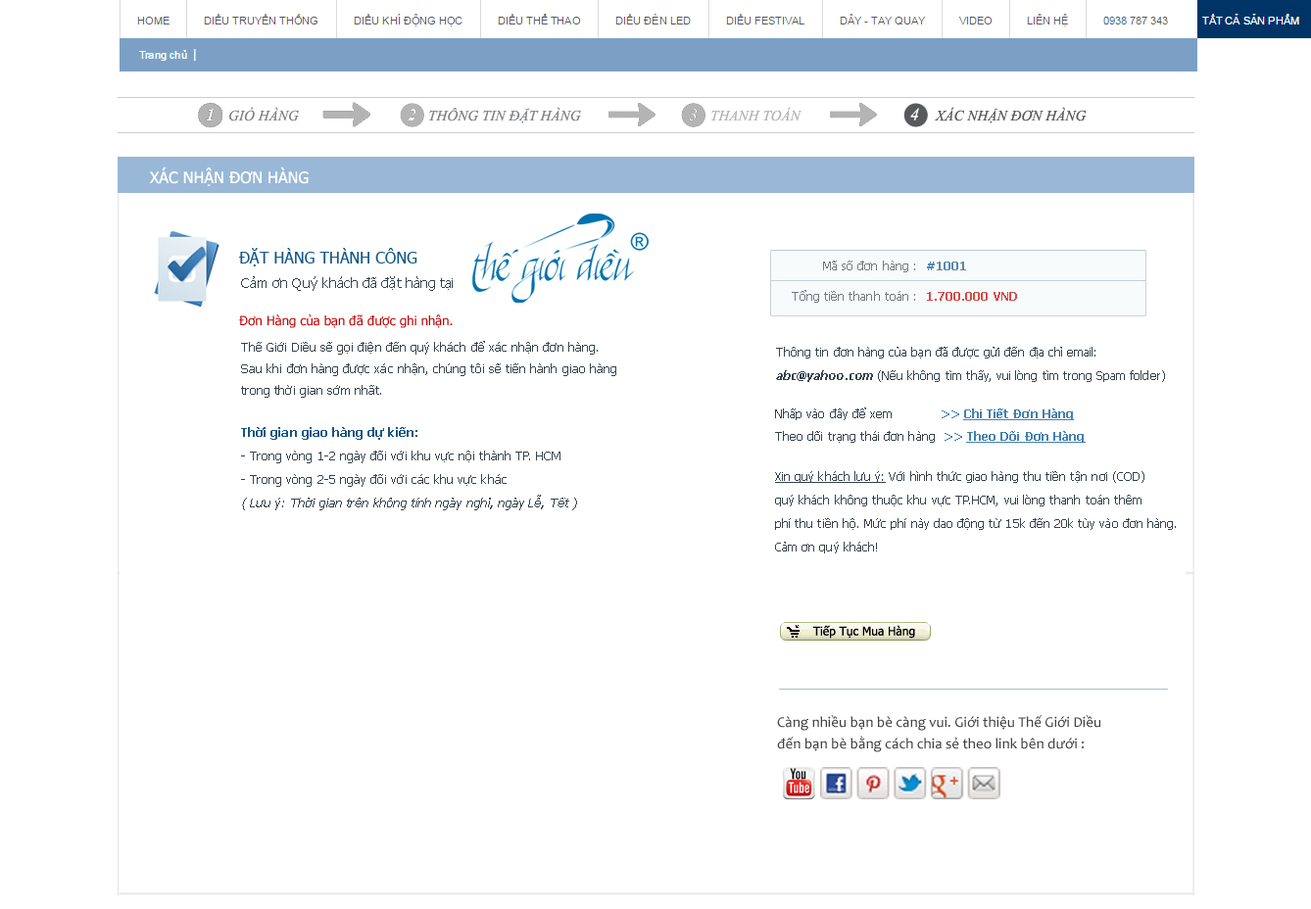
<style>
.page{position:relative;width:1311px;height:909px;background:#ffffff}
.page>*{position:absolute;margin:0}
.t1{font:14.7px "TimesNewRomanPS-ItalicMT";letter-spacing:0.005em;color:#808285}
.t2{font:14.7px "TimesNewRomanPS-ItalicMT";letter-spacing:0.005em;color:#b4b4b4}
.t3{font:17.6px "TimesNewRomanPS-ItalicMT";letter-spacing:0.005em;color:#ffffff}
.t4{font:14.7px "TimesNewRomanPS-ItalicMT";letter-spacing:0.005em;color:#58595b}
.t5{font:15.7px "Tahoma";letter-spacing:0.005em;color:#ffffff}
.t6{font:15.7px "Tahoma";letter-spacing:0.005em;color:#125687}
.t7{font:11.8px "Tahoma";letter-spacing:0.005em;color:#727a80}
.t8{font:11.8px "Tahoma-Bold";letter-spacing:0.005em;color:#5988ab}
.t9{font:13.7px "Tahoma";letter-spacing:0.005em;color:#36424a}
.t10{font:11.8px "Tahoma-Bold";letter-spacing:0.005em;color:#d24c4c}
.t11{font:12.7px "Tahoma";letter-spacing:0.005em;color:#bf0000}
.t12{font:12.7px/21.6px "Tahoma";letter-spacing:0.005em;color:#36424a}
.t13{font:11.8px/23.5px "Tahoma";letter-spacing:0.005em;color:#36424a}
.t14{font:11.8px/23.5px "Tahoma-Bold";letter-spacing:0.005em;color:#36424a;font-style:italic}
.t15{font:11.8px "Tahoma";letter-spacing:0.005em;color:#36424a}
.t16{font:11.8px "Tahoma-Bold";letter-spacing:0.005em;color:#4280af}
.t17{font:11.8px "Tahoma-Bold";letter-spacing:0.005em;color:#4280af;text-decoration:underline}
.t18{font:12.7px/23.5px "Tahoma";letter-spacing:0.005em;color:#36424a}
.t19{font:12.7px/23.5px "Tahoma-Bold";letter-spacing:0.005em;color:#125687}
.t20{font:12.7px/23.5px "Tahoma";letter-spacing:0.005em;color:#36424a;font-style:italic}
.t21{font:11.8px/23.5px "Tahoma";letter-spacing:0.005em;color:#36424a;text-decoration:underline}
.t22{font:14.7px/21.6px "Candara";letter-spacing:0.005em;color:#414042}
</style>
<div class="page">
<p class="t1" style="left:229px;top:107px;width:70px;height:15px">GIỎ HÀNG</p>
<p class="t1" style="left:429px;top:107px;width:152px;height:16px">THÔNG TIN ĐẶT HÀNG</p>
<p class="t2" style="left:711px;top:107px;width:92px;height:15px">THANH TOÁN</p>
<p class="t3" style="left:910px;top:108px;width:9px;height:13px">4</p>
<p class="t4" style="left:934px;top:107px;width:153px;height:16px">XÁC NHẬN ĐƠN HÀNG</p>
<p class="t5" style="left:150px;top:167px;width:159px;height:19px">XÁC NHẬN ĐƠN HÀNG</p>
<p class="t6" style="left:239px;top:248px;width:178px;height:19px">ĐẶT HÀNG THÀNH CÔNG</p>
<p class="t7" style="left:823px;top:261px;width:92px;height:11px">Mã số đơn hàng :</p>
<p class="t8" style="left:927px;top:262px;width:39px;height:8px">#1001</p>
<p class="t9" style="left:241px;top:276px;width:212px;height:15px">Cảm ơn Quý khách đã đặt hàng tại</p>
<p class="t7" style="left:792px;top:290px;width:123px;height:13px">Tổng tiền thanh toán :</p>
<p class="t10" style="left:927px;top:292px;width:90px;height:9px">1.700.000 VND</p>
<p class="t11" style="left:239px;top:315px;width:214px;height:13px">Đơn Hàng của bạn đã được ghi nhận.</p>
<p class="t12" style="left:241px;top:341px;width:375px;height:57px">Thế Giới Diều sẽ gọi điện đến quý khách để xác nhận đơn hàng.<br>Sau khi đơn hàng được xác nhận, chúng tôi sẽ tiến hành giao hàng<br>trong thời gian sớm nhất.</p>
<p class="t13" style="left:776px;top:347px;width:389px;height:35px">Thông tin đơn hàng của bạn đã được gửi đến địa chỉ email: <br><span class="t14">abc@yahoo.com </span>(Nếu không tìm thấy, vui lòng tìm trong Spam folder)</p>
<p class="t15" style="left:775px;top:408px;width:299px;height:12px">Nhấp vào đây để xem<span class="t16">            &gt;&gt; </span><span class="t17">Chi Tiết Đơn Hàng</span></p>
<p class="t18" style="left:241px;top:427px;width:336px;height:84px"><span class="t19">Thời gian giao hàng dự kiến:<br></span>- Trong vòng 1-2 ngày đối với khu vực nội thành TP. HCM<br>- Trong vòng 2-5 ngày đối với các khu vực khác<br><span class="t20">( Lưu ý: Thời gian trên không tính ngày nghỉ, ngày Lễ, Tết )</span></p>
<p class="t15" style="left:775px;top:431px;width:311px;height:12px">Theo dõi trạng thái đơn hàng  <span class="t16">&gt;&gt; </span><span class="t17">Theo Dõi Đơn Hàng</span></p>
<p class="t13" style="left:775px;top:471px;width:401px;height:83px"><span class="t21">Xin quý khách lưu ý:</span> Với hình thức giao hàng thu tiền tận nơi (COD)<br>quý khách không thuộc khu vực TP.HCM, vui lòng thanh toán thêm<br>phí thu tiền hộ. Mức phí này dao động từ 15k đến 20k tùy vào đơn hàng.<br>Cảm ơn quý khách!</p>
<p class="t22" style="left:777px;top:715px;width:324px;height:38px">Càng nhiều bạn bè càng vui. Giới thiệu Thế Giới Diều<br>đến bạn bè bằng cách chia sẻ theo link bên dưới :</p>
</div>
